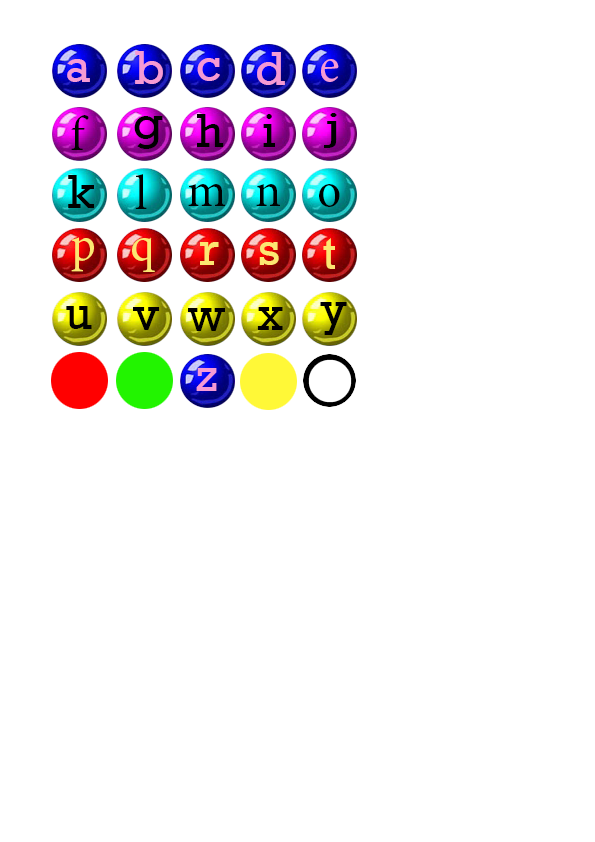
<style>
.page{position:relative;width:595px;height:842px;background:#ffffff}
.page>*{position:absolute;margin:0}
.t1{font:48px "Rockwell";color:#f59ad4}
.t2{font:48px "MinionPro-Regular";color:#f59ad4}
.t3{font:38.7px "Rockwell";color:#000000;scale:1.43 1}
.t4{font:48px "MinionPro-Regular";color:#000000}
.t5{font:48px "Rockwell";color:#000000}
.t6{font:48px "MinionPro-Regular";color:#fce772}
.t7{font:48px "Rockwell";color:#fce772}
</style>
<div class="page">
<p class="t1" style="left:135px;top:51px;width:28px;height:33px">b</p>
<p class="t1" style="left:257px;top:52px;width:28px;height:33px">d</p>
<p class="t1" style="left:67px;top:59px;width:23px;height:23px">a</p>
<p class="t1" style="left:197px;top:58px;width:23px;height:23px">c</p>
<p class="t2" style="left:321px;top:59px;width:18px;height:23px">e</p>
<p class="t3" style="left:324px;top:113px;width:13px;height:35px">j</p>
<p class="t4" style="left:71px;top:115px;width:18px;height:35px">f</p>
<p class="t5" style="left:134px;top:116px;width:29px;height:33px">g</p>
<p class="t5" style="left:197px;top:114px;width:27px;height:33px">h</p>
<p class="t5" style="left:263px;top:114px;width:12px;height:33px">i</p>
<p class="t4" style="left:135px;top:174px;width:12px;height:35px">l</p>
<p class="t5" style="left:68px;top:175px;width:26px;height:33px">k</p>
<p class="t4" style="left:188px;top:184px;width:37px;height:22px">m</p>
<p class="t4" style="left:256px;top:184px;width:24px;height:22px">n</p>
<p class="t4" style="left:319px;top:184px;width:21px;height:23px">o</p>
<p class="t6" style="left:71px;top:237px;width:23px;height:35px">p</p>
<p class="t6" style="left:132px;top:237px;width:23px;height:35px">q</p>
<p class="t7" style="left:200px;top:242px;width:19px;height:23px">r</p>
<p class="t7" style="left:259px;top:242px;width:20px;height:23px">s</p>
<p class="t7" style="left:323px;top:238px;width:12px;height:31px">t</p>
<p class="t5" style="left:320px;top:302px;width:27px;height:33px">y</p>
<p class="t5" style="left:66px;top:306px;width:26px;height:23px">u</p>
<p class="t5" style="left:133px;top:307px;width:27px;height:23px">v</p>
<p class="t5" style="left:188px;top:308px;width:37px;height:23px">w</p>
<p class="t5" style="left:257px;top:307px;width:26px;height:23px">x</p>
<p class="t1" style="left:196px;top:368px;width:21px;height:23px">z</p>
</div>
